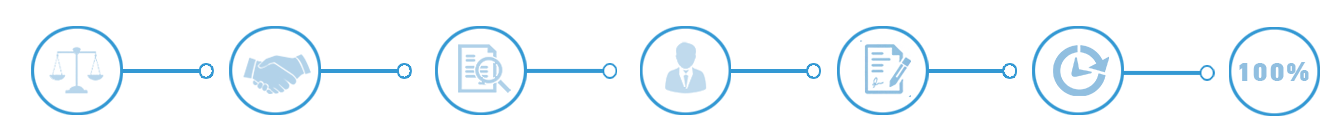
<style>
.page{position:relative;width:1342px;height:133px;background:#ffffff}
.page>*{position:absolute;margin:0}
.t1{font:25.6px "PFDinTextPro-ExtraBlack";letter-spacing:0.025em;color:#91bfe0;scale:1.04 1}
</style>
<div class="page">
<p class="t1" style="left:1239px;top:62px;width:70px;height:19px">100%</p>
</div>
